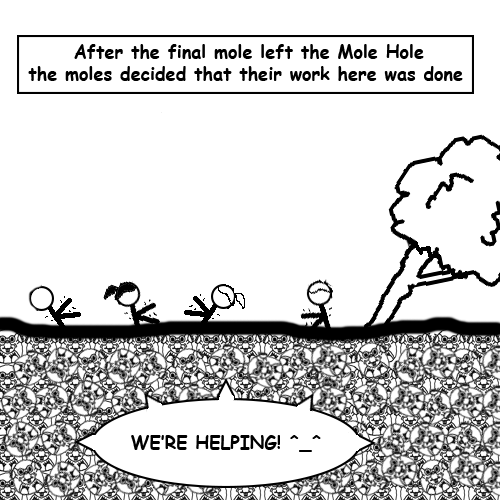
<style>
.page{position:relative;width:500px;height:500px;background:#ffffff}
.page>*{position:absolute;margin:0}
.t1{font:18px "ComicSansMS-Bold";color:#000000}
</style>
<div class="page">
<p class="t1" style="left:28px;top:44px;width:435px;height:37px">After the final mole left the Mole Hole     <br> the moles decided that their work here was done</p>
</div>
